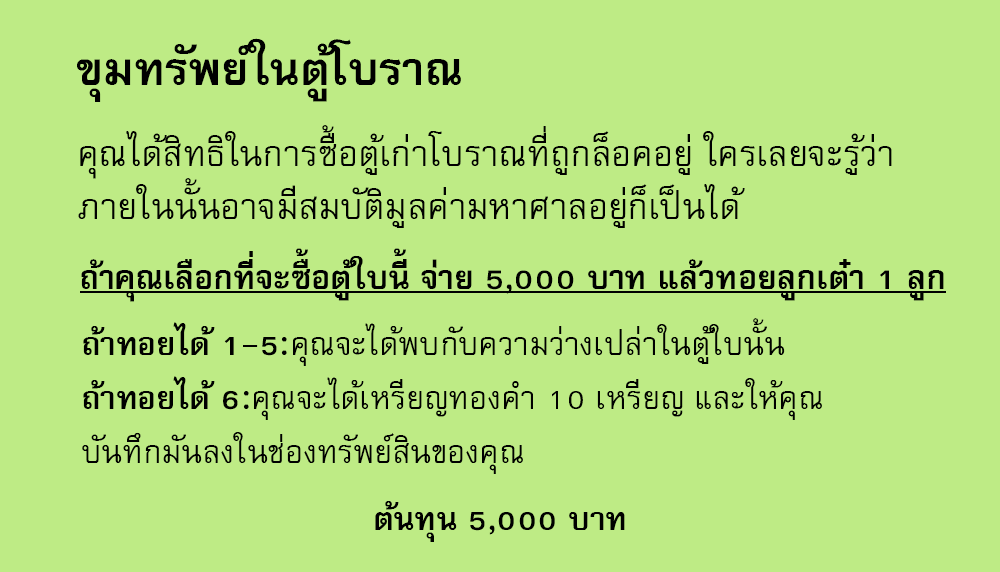
<style>
.page{position:relative;width:1000px;height:572px;background:#beeb85}
.page>*{position:absolute;margin:0}
.t1{font:64px "FreesiaUPCBold";color:#000000}
.t2{font:50px/53px "FreesiaUPC";color:#000000}
.t3{font:46px "FreesiaUPCBold";color:#000000}
.t4{font:45px "FreesiaUPC";color:#000000}
.t5{font:45px "FreesiaUPCBold";color:#000000}
</style>
<div class="page">
<p class="t1" style="left:77px;top:38px;width:384px;height:64px">ขุมทรัพย์ในตู้โบราณ</p>
<p class="t2" style="left:78px;top:125px;width:814px;height:103px">คุณได้สิทธิในการซื้อตู้เก่าโบราณที่ถูกล็อคอยู่ ใครเลยจะรู้ว่า<br>ภายในนั้นอาจมีสมบัติมูลค่ามหาศาลอยู่ก็เป็นได้</p>
<p class="t3" style="left:81px;top:248px;width:863px;height:54px">ถ้าคุณเลือกที่จะซื้อตู้ใบนี้ จ่าย 5,000 บาท แล้วทอยลูกเต๋า 1 ลูก</p>
<p class="t4" style="left:82px;top:318px;width:740px;height:156px"><span class="t5">ถ้าทอยได้ 1-5:</span>คุณจะได้พบกับความว่างเปล่าในตู้ใบนั้น<br><span class="t5">ถ้าทอยได้ 6:</span>คุณจะได้เหรียญทองคำ 10 เหรียญ และให้คุณ<br>บันทึกมันลงในช่องทรัพย์สินของคุณ</p>
<p class="t5" style="left:375px;top:501px;width:250px;height:41px">ต้นทุน 5,000 บาท</p>
</div>
